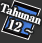
<style>
.page{position:relative;width:42px;height:43px;background:#333333}
.page>*{position:absolute;margin:0}
.t1{font:11px/14px "RyuminPro-ExBold";letter-spacing:-0.08em;color:#ffffff;font-weight:bold}
.t2{font:13px/14px "RyuminPro-ExBold";color:#ffffff;font-weight:bold}
.t3{font:13px/14px "WineArial";color:#ffffff;font-weight:bold}
</style>
<div class="page">
<p class="t1" style="left:0px;top:3px;width:41px;height:30px;text-align:center;rotate:19deg">Tahunan<br><span class="t2">  12 </span><span class="t3">~</span></p>
</div>
